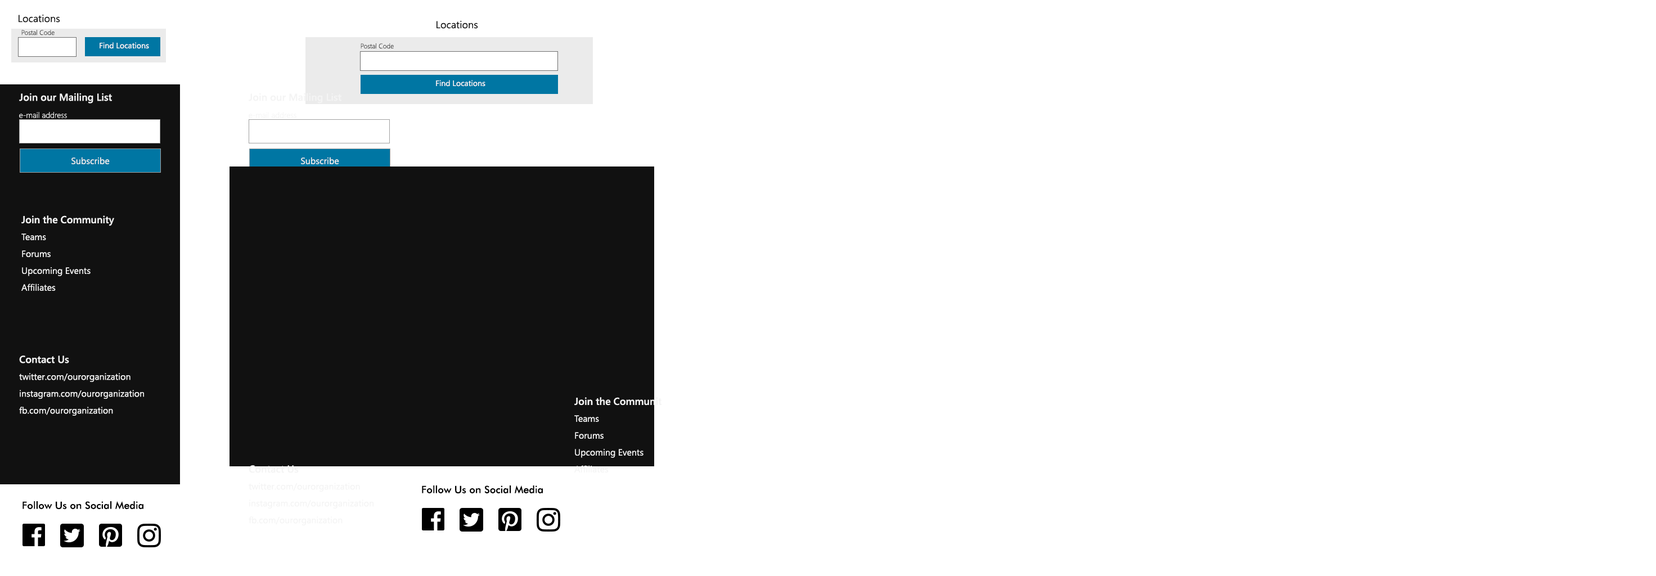
<style>
.page{position:relative;width:1656px;height:576px;background:#ffffff}
.page>*{position:absolute;margin:0}
.t1{font:10.1px "SegoeUI";color:#111111}
.t2{font:6.8px "SegoeUI-Light";color:#111111}
.t3{font:7.9px "SegoeUI";color:#fdf7f7}
.t4{font:10.1px "SegoeUI-Semibold";color:#f4f4f4}
.t5{font:7.9px "SegoeUI-Light";color:#f4f4f4}
.t6{font:9px "SegoeUI";color:#ededed}
.t7{font:9px/16.9px "SegoeUI";color:#f4f4f4}
.t8{font:10.1px/16.9px "SegoeUI-Semibold";color:#f4f4f4}
.t9{font:10.1px "FuturaBT-Medium";color:#000000}
</style>
<div class="page">
<p class="t1" style="left:19px;top:15px;width:41px;height:7px">Locations</p>
<p class="t2" style="left:21px;top:30px;width:34px;height:5px">Postal Code</p>
<p class="t1" style="left:436px;top:21px;width:42px;height:8px">Locations</p>
<p class="t3" style="left:100px;top:42px;width:49px;height:7px">Find Locations</p>
<p class="t2" style="left:361px;top:43px;width:33px;height:6px">Postal Code</p>
<p class="t3" style="left:436px;top:80px;width:49px;height:7px">Find Locations</p>
<p class="t4" style="left:19px;top:93px;width:93px;height:11px">Join our Mailing List</p>
<p class="t5" style="left:19px;top:112px;width:48px;height:6px">e-mail address</p>
<p class="t5" style="left:249px;top:112px;width:47px;height:6px">e-mail address</p>
<p class="t6" style="left:71px;top:157px;width:39px;height:7px">Subscribe</p>
<p class="t6" style="left:301px;top:157px;width:38px;height:7px">Subscribe</p>
<p class="t7" style="left:21px;top:215px;width:93px;height:76px"><span class="t8">Join the Community<br></span>Teams<br>Forums<br>Upcoming Events<br>Affiliates</p>
<p class="t7" style="left:19px;top:356px;width:125px;height:60px"><span class="t8">Contact Us<br></span>twitter.com/ourorganization<br>instagram.com/ourorganization<br>fb.com/ourorganization</p>
<p class="t7" style="left:574px;top:397px;width:93px;height:75px"><span class="t8">Join the Community<br></span>Teams<br>Forums<br>Upcoming Events<br>Affiliates</p>
<p class="t9" style="left:422px;top:485px;width:121px;height:9px">Follow Us on Social Media</p>
<p class="t9" style="left:22px;top:501px;width:121px;height:9px">Follow Us on Social Media</p>
</div>
